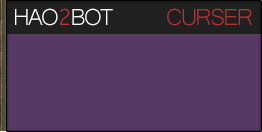
<style>
.page{position:relative;width:262px;height:132px;background:#583965}
.page>*{position:absolute;margin:0}
.t1{font:30px "Microsoft-Yi-Baiti";letter-spacing:-0.06em;color:#ffffff}
.t2{font:30px "Microsoft-Yi-Baiti";letter-spacing:-0.06em;color:#ba3a3a}
.t3{font:30px "Microsoft-Yi-Baiti";letter-spacing:-0.06em;color:#ac3737}
</style>
<div class="page">
<p class="t1" style="left:15px;top:8px;width:98px;height:18px">HAO<span class="t2">2</span>BOT</p>
<p class="t3" style="left:167px;top:8px;width:85px;height:18px">CURSER</p>
</div>
